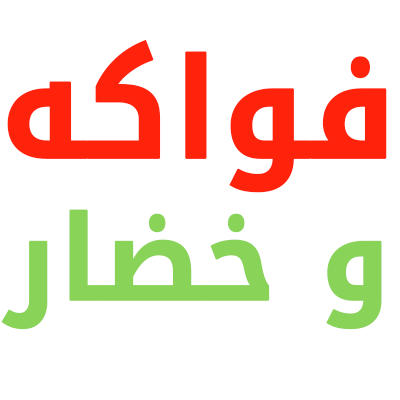
<style>
.page{position:relative;width:400px;height:400px;background:#ffffff}
.page>*{position:absolute;margin:0}
.t1{font:118.4px "DroidArabicKufi-Bold";color:#89d359;font-weight:bold;scale:0.94 1}
.t2{font:138.6px "DroidArabicKufi-Bold";color:#ff230c;font-weight:bold;scale:0.94 1}
</style>
<div class="page">
<p class="t1" style="left:1px;top:39px;width:386px;height:291px;text-align:center"><span class="t2">فواكه<br></span>و خضار</p>
</div>
